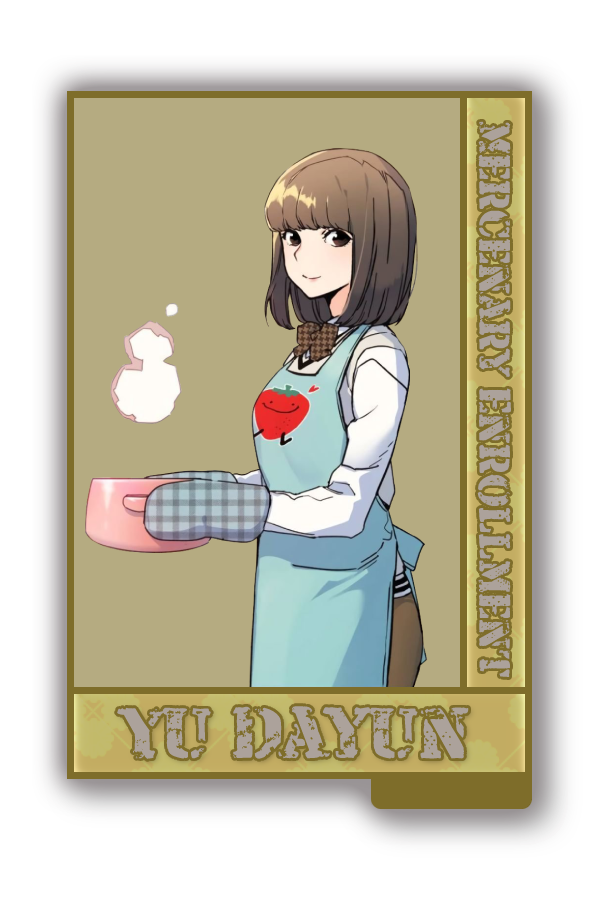
<style>
.page{position:relative;width:600px;height:900px;background:#b5ab81}
.page>*{position:absolute;margin:0}
.t1{font:45px "ArmaliteRifle";color:#aca29b}
.t2{font:75px "ArmaliteRifle";color:#aca29b}
</style>
<div class="page">
<p class="t1" style="left:477px;top:121px;width:34px;height:556px;rotate:90deg">Mercenary Enrollment</p>
<p class="t2" style="left:117px;top:706px;width:352px;height:53px">Yu Dayun</p>
</div>
